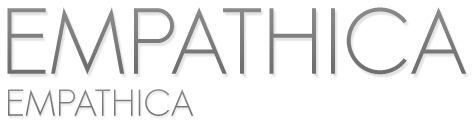
<style>
.page{position:relative;width:475px;height:124px;background:#ffffff}
.page>*{position:absolute;margin:0}
.t1{font:90px "Sawasdee";color:#757575}
.t2{font:36px "Sawasdee";color:#757575}
</style>
<div class="page">
<p class="t1" style="left:7px;top:7px;width:460px;height:68px">EMPATHICA</p>
<p class="t2" style="left:8px;top:89px;width:186px;height:27px">EMPATHICA</p>
</div>
